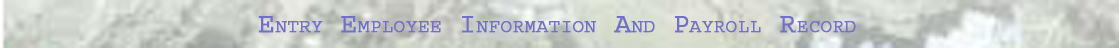
<style>
.page{position:relative;width:1119px;height:48px}
.page>*{position:absolute;margin:0}
.t1{font:27.4px "Courier";color:#7270c7;font-variant:small-caps;font-weight:bold}
</style>
<div class="page">
<p class="t1" style="left:258px;top:16px;width:598px;height:17px">Entry Employee Information And Payroll Record</p>
</div>
